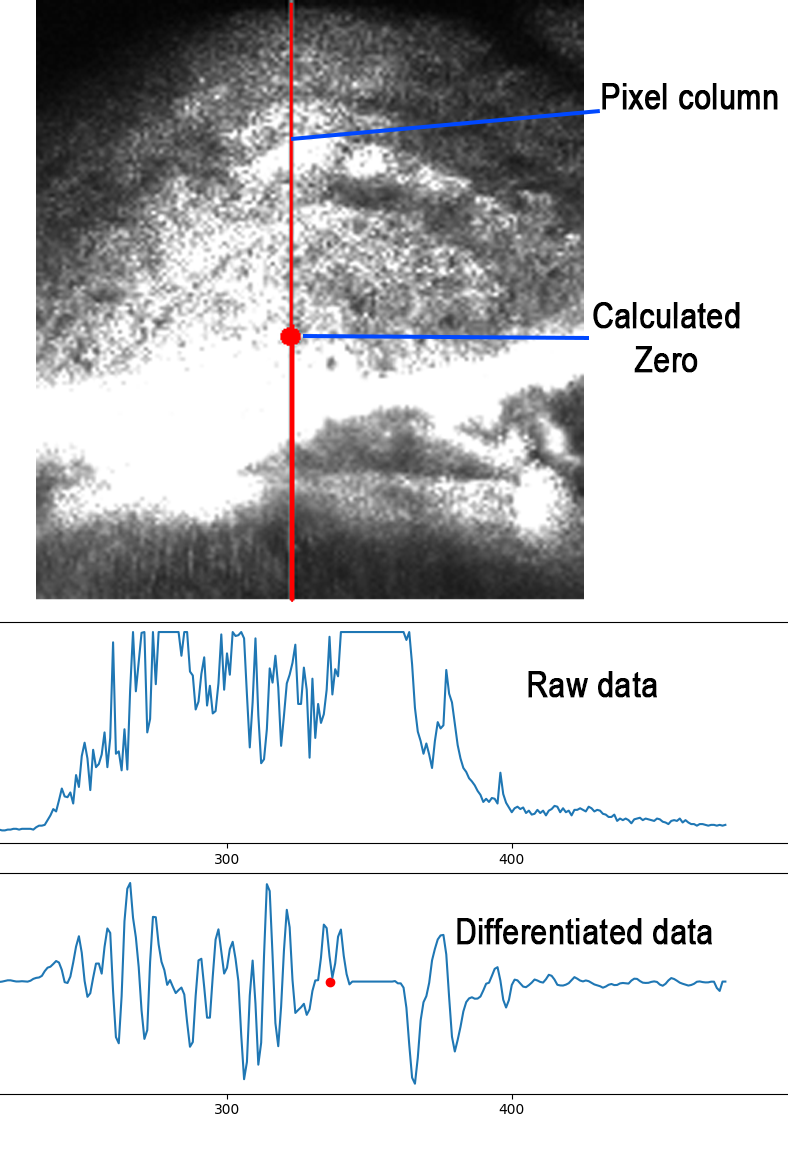
<style>
.page{position:relative;width:788px;height:1152px;background:#ffffff}
.page>*{position:absolute;margin:0}
.t1{font:36px "ArialNarrow";color:#000000;font-weight:bold}
</style>
<div class="page">
<p class="t1" style="left:602px;top:83px;width:176px;height:27px">Pixel column</p>
<p class="t1" style="left:593px;top:302px;width:147px;height:71px;text-align:center">Calculated<br>Zero</p>
<p class="t1" style="left:528px;top:671px;width:129px;height:27px">Raw data</p>
<p class="t1" style="left:457px;top:918px;width:255px;height:27px">Differentiated data</p>
</div>
